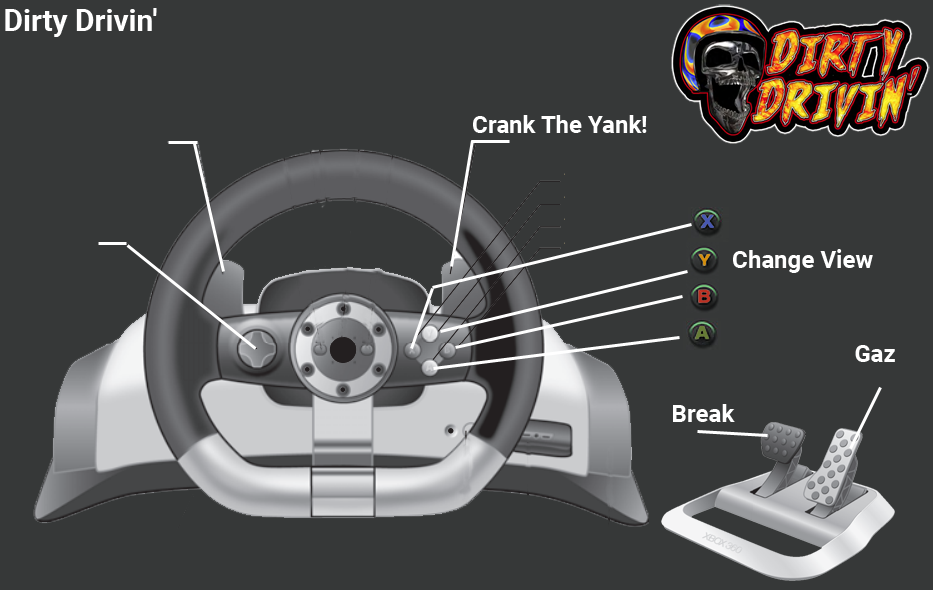
<style>
.page{position:relative;width:933px;height:590px;background:#363838}
.page>*{position:absolute;margin:0}
.t1{font:30px "Roboto-Bold";color:#ffffff}
.t2{font:24px "Roboto-Bold";color:#ffffff}
</style>
<div class="page">
<p class="t1" style="left:5px;top:8px;width:152px;height:29px">Dirty Drivin'</p>
<p class="t2" style="left:473px;top:115px;width:174px;height:18px">Crank The Yank!</p>
<p class="t2" style="left:733px;top:249px;width:140px;height:24px">Change View</p>
<p class="t2" style="left:855px;top:345px;width:40px;height:17px">Gaz</p>
<p class="t2" style="left:673px;top:404px;width:62px;height:18px">Break</p>
</div>
